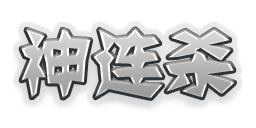
<style>
.page{position:relative;width:256px;height:128px;background:#ffffff}
.page>*{position:absolute;margin:0}
.t1{font:72px "FZJZJW--GB1-0"}
</style>
<div class="page">
<p class="t1" style="left:21px;top:29px;width:214px;height:69px">神连杀</p>
</div>
